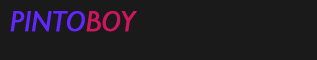
<style>
.page{position:relative;width:317px;height:60px;background:#1a1a1a}
.page>*{position:absolute;margin:0}
.t1{font:29px "GillSans-Italic";color:#6427ff;font-weight:bold}
.t2{font:29px "GillSans-Italic";color:#ce1660;font-weight:bold}
</style>
<div class="page">
<p class="t1" style="left:10px;top:11px;width:127px;height:21px">PINTO<span class="t2">BOY</span></p>
</div>
